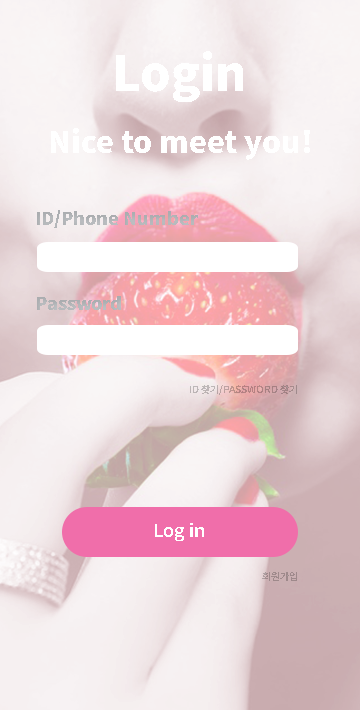
<style>
.page{position:relative;width:360px;height:710px}
.page>*{position:absolute;margin:0}
.t1{font:48px "NotoSansKR-Black";color:#ffffff}
.t2{font:30px "NotoSansKR-Black";color:#ffffff}
.t3{font:17.9px "NotoSansKR-Black";color:#c3c6c9}
.t4{font:10px "NotoSansKR-SemiBold"}
.t5{font:18px "NotoSansKR-SemiBold";color:#ffffff}
.t6{font:9.9px "NotoSansKR-SemiBold";color:#9e898b}
</style>
<div class="page">
<p class="t1" style="left:116px;top:51px;width:127px;height:51px">Login</p>
<p class="t2" style="left:51px;top:128px;width:259px;height:32px">Nice to meet you!</p>
<p class="t3" style="left:37px;top:210px;width:161px;height:18px">ID/Phone Number</p>
<p class="t3" style="left:37px;top:296px;width:84px;height:14px">Password</p>
<p class="t4" style="left:190px;top:385px;width:107px;height:10px">ID 찾기/PASSWORD 찾기</p>
<p class="t5" style="left:155px;top:523px;width:49px;height:18px">Log in</p>
<p class="t6" style="left:262px;top:572px;width:35px;height:9px">회원가입</p>
</div>
